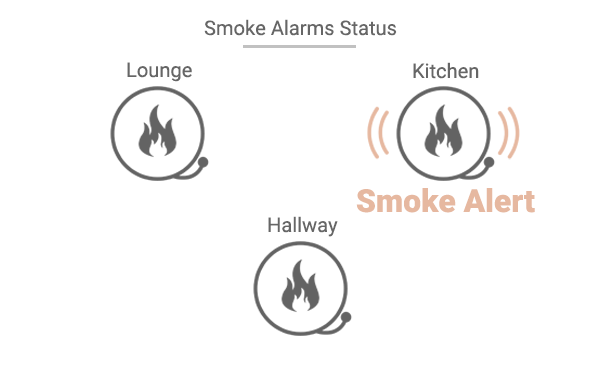
<style>
.page{position:relative;width:600px;height:371px;background:#ffffff}
.page>*{position:absolute;margin:0}
.t1{font:20.1px "Roboto-Regular";color:#666666}
.t2{font:31.8px "Roboto-Black";color:#e6b8a0}
</style>
<div class="page">
<p class="t1" style="left:204px;top:19px;width:193px;height:17px">Smoke Alarms Status</p>
<p class="t1" style="left:127px;top:62px;width:65px;height:20px">Lounge</p>
<p class="t1" style="left:413px;top:62px;width:66px;height:17px">Kitchen</p>
<p class="t2" style="left:356px;top:188px;width:179px;height:25px">Smoke Alert</p>
<p class="t1" style="left:268px;top:216px;width:70px;height:21px">Hallway</p>
</div>
